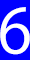
<style>
.page{position:relative;width:30px;height:60px;background:#0000ff}
.page>*{position:absolute;margin:0}
.t1{font:60.7px "KozGoPr6N-Regular";color:#ffffff}
</style>
<div class="page">
<p class="t1" style="left:0px;top:7px;width:30px;height:48px">6</p>
</div>
